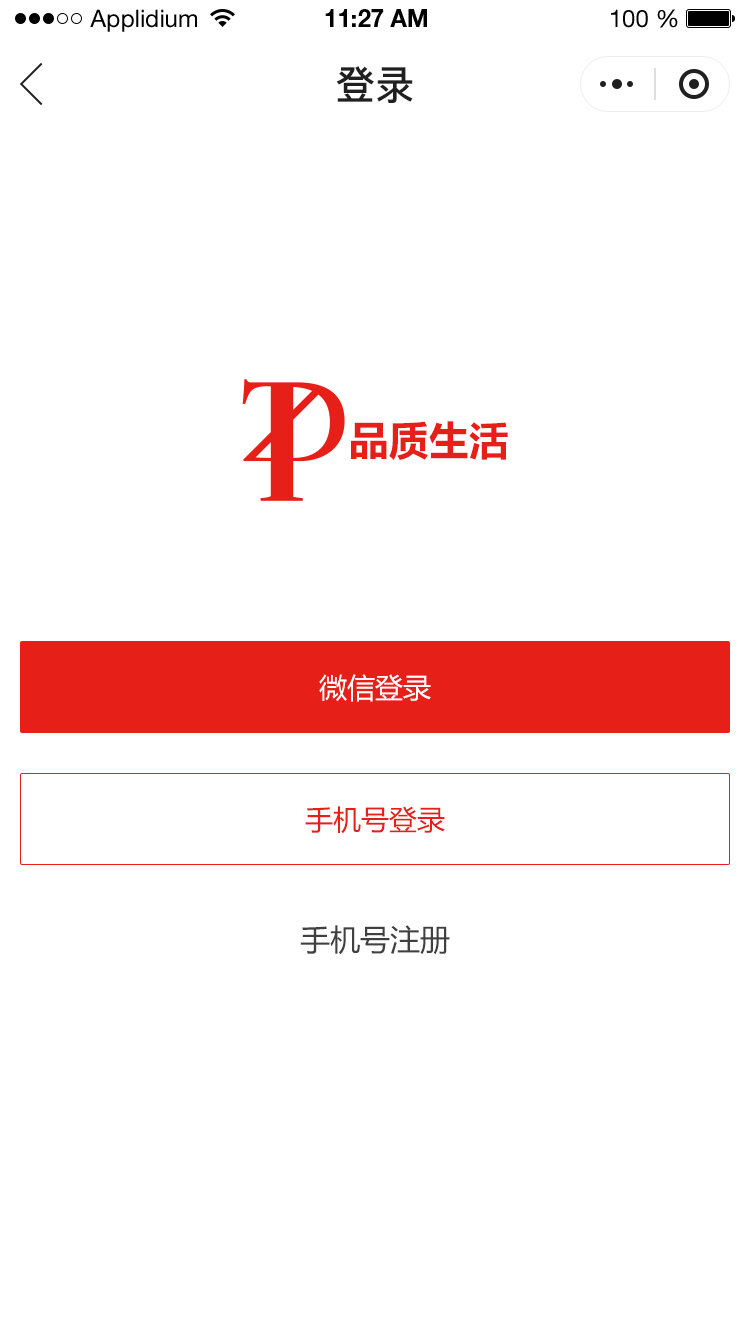
<style>
.page{position:relative;width:750px;height:1334px;background:#ffffff}
.page>*{position:absolute;margin:0}
.t1{font:24px "HelveticaNeueLTStd-Roman";color:#000000}
.t2{font:24px "HelveticaNeueLTStd-Bd";color:#000000}
.t3{font:40px "PingFang-SC-Bold";color:#202020;text-transform:uppercase}
.t4{font:40px "MicrosoftYaHei-Bold";color:#e61f18;text-transform:uppercase}
.t5{font:28px "MicrosoftYaHei";color:#ffffff;text-transform:uppercase}
.t6{font:28px "MicrosoftYaHei";color:#e61f18;text-transform:uppercase}
.t7{font:30px "MicrosoftYaHei";color:#404040;text-transform:uppercase}
</style>
<div class="page">
<p class="t1" style="left:90px;top:9px;width:107px;height:23px">Applidium</p>
<p class="t2" style="left:325px;top:9px;width:102px;height:18px">11:27 AM</p>
<p class="t1" style="left:611px;top:9px;width:67px;height:19px">100 %</p>
<p class="t3" style="left:336px;top:66px;width:77px;height:37px">登录</p>
<p class="t4" style="left:351px;top:421px;width:157px;height:39px">品质生活</p>
<p class="t5" style="left:319px;top:674px;width:112px;height:28px">微信登录</p>
<p class="t6" style="left:305px;top:806px;width:140px;height:28px">手机号登录</p>
<p class="t7" style="left:300px;top:925px;width:150px;height:30px">手机号注册</p>
</div>
